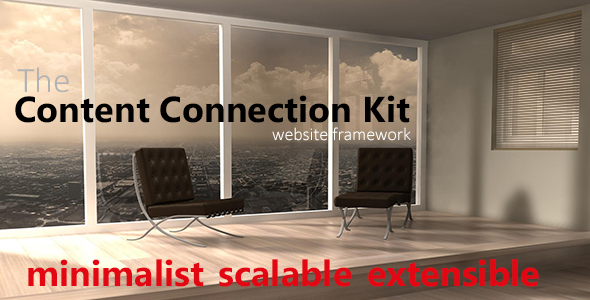
<style>
.page{position:relative;width:590px;height:300px}
.page>*{position:absolute;margin:0}
.t1{font:36px "Calibri-Light";color:#b2b2b2}
.t2{font:36px "Ebrima-Bold";color:#010000}
.t3{font:18px "Calibri-Light";color:#ffffff}
.t4{font:36px "Ebrima-Bold";color:#e30613}
</style>
<div class="page">
<p class="t1" style="left:17px;top:67px;width:52px;height:26px">The</p>
<p class="t2" style="left:15px;top:95px;width:395px;height:28px">Content Connection Kit</p>
<p class="t3" style="left:272px;top:127px;width:139px;height:14px">website framework</p>
<p class="t4" style="left:28px;top:259px;width:176px;height:28px">minimalist</p>
<p class="t4" style="left:219px;top:259px;width:133px;height:28px">scalable</p>
<p class="t4" style="left:368px;top:259px;width:171px;height:28px">extensible</p>
</div>
